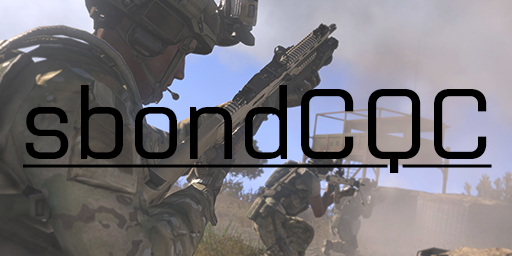
<style>
.page{position:relative;width:512px;height:256px}
.page>*{position:absolute;margin:0}
.t1{font:100px "Purista-Medium";color:#000000}
</style>
<div class="page">
<p class="t1" style="left:25px;top:85px;width:462px;height:88px">sbondCQC</p>
</div>
